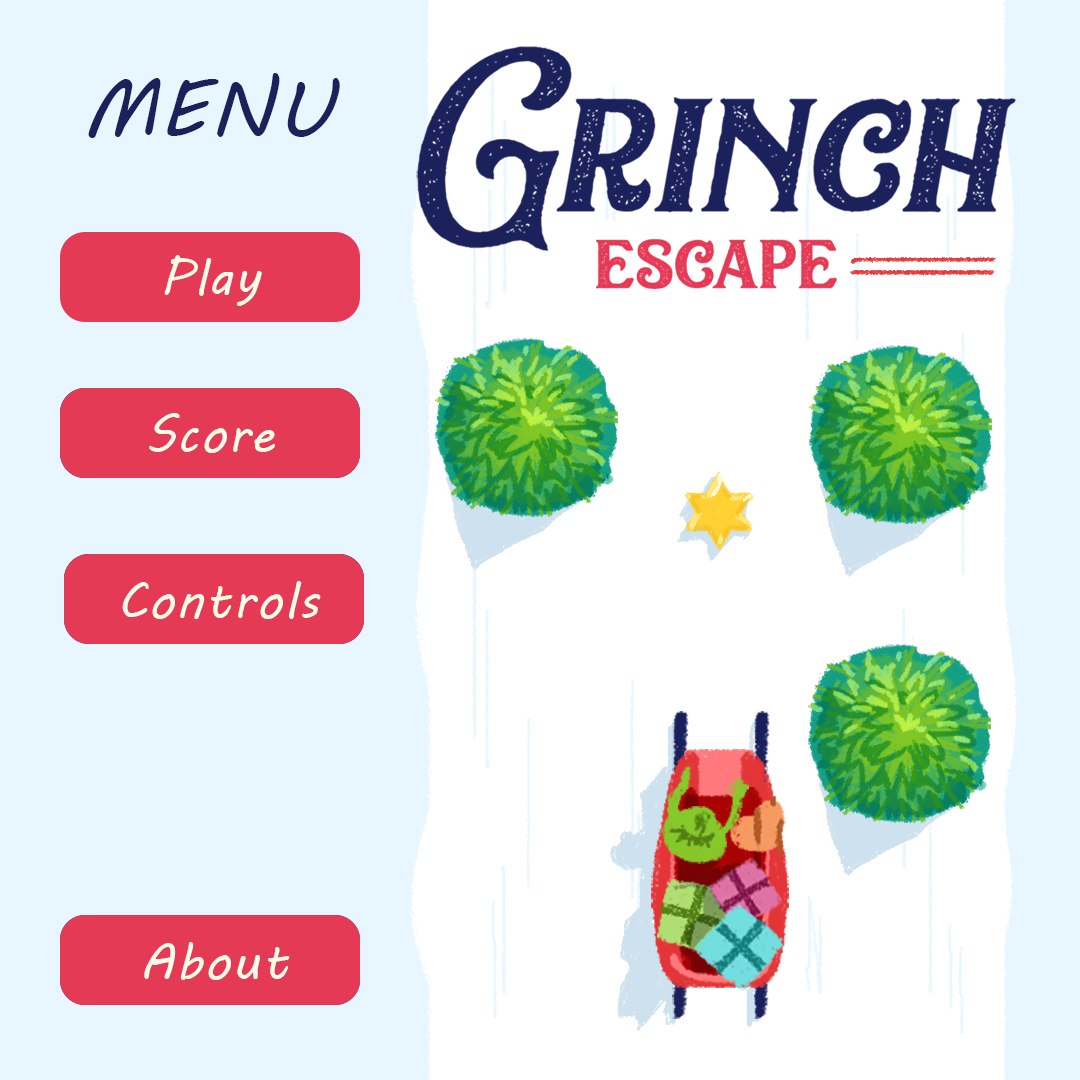
<style>
.page{position:relative;width:1080px;height:1080px;background:#ffffff}
.page>*{position:absolute;margin:0}
.t1{font:80px "MVBoli";letter-spacing:0.03em;color:#1a215b}
.t2{font:50px "MVBoli";letter-spacing:0.03em;color:#fdfce9}
.t3{font:50px "CenturyGothic";letter-spacing:0.03em;color:#fdfce9}
</style>
<div class="page">
<p class="t1" style="left:88px;top:73px;width:252px;height:65px">MENU</p>
<p class="t2" style="left:164px;top:255px;width:98px;height:51px"><span class="t3"><br></span><br>Play</p>
<p class="t2" style="left:149px;top:413px;width:126px;height:40px">Score</p>
<p class="t2" style="left:122px;top:581px;width:199px;height:38px">Controls</p>
<p class="t2" style="left:144px;top:942px;width:146px;height:38px">About</p>
</div>
